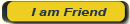
<style>
.page{position:relative;width:130px;height:24px;background:#eece20}
.page>*{position:absolute;margin:0}
.t1{font:11.2px "Arial-BoldItalicMT";color:#233645;scale:1.25 1}
</style>
<div class="page">
<p class="t1" style="left:31px;top:8px;width:76px;height:8px">I am Friend</p>
</div>
